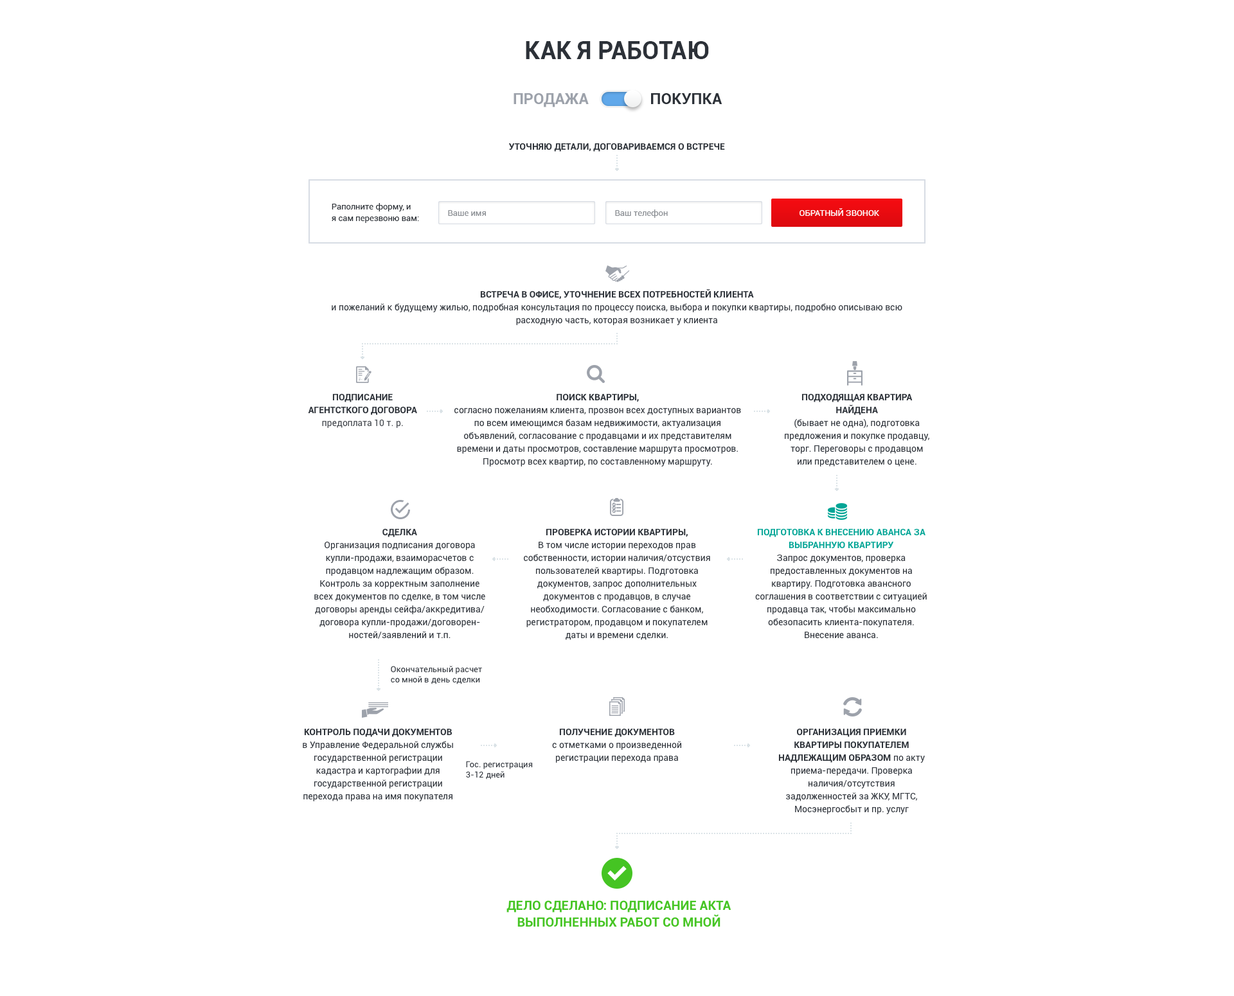
<style>
.page{position:relative;width:1234px;height:996px;background:#ffffff}
.page>*{position:absolute;margin:0}
.t1{font:24.4px "Roboto-Bold";color:#2c3138;text-transform:uppercase}
.t2{font:15.4px "Roboto-Bold";color:#9da2ab;text-transform:uppercase}
.t3{font:15.4px "Roboto-Bold";color:#2c3138;text-transform:uppercase}
.t4{font:9px "Roboto-Bold";color:#2c3138;text-transform:uppercase}
.t5{font:8.4px/11.6px "Roboto-Regular";color:#2c3138}
.t6{font:8.4px "Roboto-Regular";color:#8a8e93}
.t7{font:8.4px "Roboto-Regular";color:#ffffff;text-transform:uppercase}
.t8{font:9px/12.9px "Roboto-Regular";color:#2c3138}
.t9{font:9px/12.9px "Roboto-Bold";color:#2c3138;text-transform:uppercase}
.t10{font:9px/12.9px "Roboto-Regular";color:#3e4248}
.t11{font:9px/12.9px "Roboto-Bold";color:#03a596;text-transform:uppercase}
.t12{font:8.4px/10.3px "Roboto-Regular";color:#2c3138}
.t13{font:12.9px/16.7px "Roboto-Bold";color:#46c524;text-transform:uppercase}
</style>
<div class="page">
<p class="t1" style="left:526px;top:41px;width:183px;height:18px">Как я работаю</p>
<p class="t2" style="left:514px;top:93px;width:209px;height:14px">Продажа                <span class="t3">Покупка</span></p>
<p class="t4" style="left:509px;top:143px;width:216px;height:9px">Уточняю детали, договариваемся о встрече</p>
<p class="t5" style="left:332px;top:203px;width:87px;height:20px">Pаполните форму, и<br>я сам перезвоню вам:</p>
<p class="t6" style="left:615px;top:210px;width:53px;height:8px">Ваш телефон</p>
<p class="t7" style="left:800px;top:208px;width:79px;height:8px">Обратный звонок</p>
<p class="t6" style="left:448px;top:210px;width:38px;height:6px">Ваше имя</p>
<p class="t8" style="left:332px;top:289px;width:571px;height:36px;text-align:center"><span class="t9">Встреча в офисе, уточнение всех потребностей клиента<br></span>и пожеланий к будущему жилью, подробная консультация по процессу поиска, выбора и покупки квартиры, подробно описываю всю расходную часть, которая возникает у клиента</p>
<p class="t9" style="left:308px;top:393px;width:109px;height:35px;text-align:center">Подписание агентсткого договора<br><span class="t10">предоплата 10 т. р.</span></p>
<p class="t8" style="left:455px;top:393px;width:286px;height:74px;text-align:center"><span class="t9">Поиск квартиры,<br></span>согласно пожеланиям клиента, прозвон всех доступных вариантов по всем имеющимся базам недвижимости, актуализация объявлений, согласование с продавцами и их представителям времени и даты просмотров, составление маршрута просмотров. Просмотр всех квартир, по составленному маршруту.</p>
<p class="t8" style="left:785px;top:393px;width:145px;height:74px;text-align:center"><span class="t9">Подходящая квартира найдена<br></span>(бывает не одна), подготовка предложения и покупке продавцу, торг. Переговоры с продавцом или представителем о цене.</p>
<p class="t8" style="left:314px;top:528px;width:171px;height:111px;text-align:center"><span class="t9">Сделка</span><br>Организация подписания договора купли-продажи, взаиморасчетов с продавцом надлежащим образом. Контроль за корректным заполнение всех документов по сделке, в том числе договоры аренды сейфа/аккредитива/<br>договора купли-продажи/договорен-<br>ностей/заявлений и т.п.</p>
<p class="t8" style="left:524px;top:528px;width:186px;height:112px;text-align:center"><span class="t9">Проверка истории квартиры,<br></span>В том числе истории переходов прав собственности, истории наличия/отсуствия пользователей квартиры. Подготовка документов, запрос дополнительных документов с продавцов, в случае необходимости. Согласование с банком, регистратором, продавцом и покупателем даты и времени сделки.</p>
<p class="t8" style="left:755px;top:528px;width:172px;height:111px;text-align:center"><span class="t11">Подготовка к внесению аванса за выбранную квартиру<br></span>Запрос документов, проверка предоставленных документов на квартиру. Подготовка авансного соглашения в соответствии с ситуацией продавца так, чтобы максимально обезопасить клиента-покупателя. Внесение аванса.</p>
<p class="t12" style="left:391px;top:666px;width:91px;height:19px">Окончательный расчет<br>со мной в день сделки</p>
<p class="t8" style="left:303px;top:728px;width:150px;height:74px;text-align:center"><span class="t9">Контроль подачи документов</span><br>в Управление Федеральной службы государственной регистрации кадастра и картографии для государственной регистрации перехода права на имя покупателя</p>
<p class="t8" style="left:552px;top:728px;width:129px;height:35px;text-align:center"><span class="t9">Получение документов<br></span>с отметками о произведенной регистрации перехода права</p>
<p class="t8" style="left:779px;top:728px;width:146px;height:87px;text-align:center"><span class="t9">Организация приемки квартиры покупателем надлежащим образом</span> по акту приема-передачи. Проверка наличия/отсутствия задолженностей за ЖКУ, МГТС, Мосэнергосбыт и пр. услуг</p>
<p class="t12" style="left:466px;top:761px;width:67px;height:19px">Гос. регистрация<br>3-12 дней</p>
<p class="t13" style="left:507px;top:901px;width:225px;height:27px;text-align:center">Дело сделано: подписание акта выполненных работ со мной</p>
</div>
